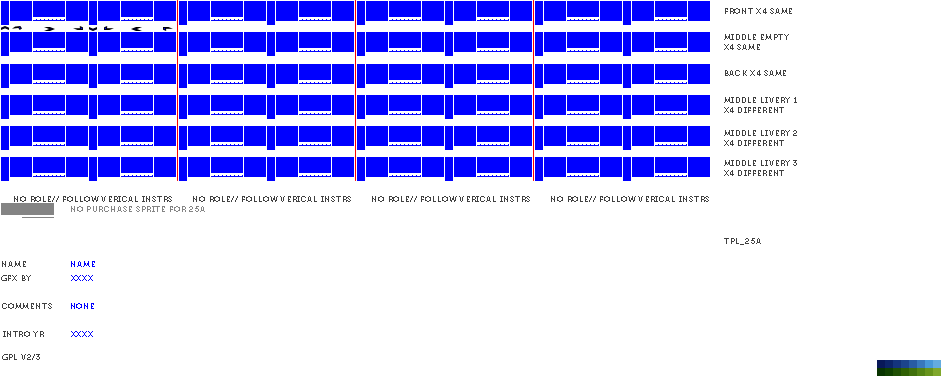
<style>
.page{position:relative;width:950px;height:380px;background:#ffffff}
.page>*{position:absolute;margin:0}
.t1{font:8px "Museo700-Regular";letter-spacing:0.075em;color:#404040;text-transform:uppercase}
.t2{font:8px "Museo700-Regular";letter-spacing:0.075em;color:#848484;text-transform:uppercase}
.t3{font:8px "Museo700-Regular";letter-spacing:0.075em;color:#0000ff;text-transform:uppercase}
</style>
<div class="page">
<p class="t1" style="left:725px;top:8px;width:67px;height:6px">front x4 same</p>
<p class="t1" style="left:724px;top:34px;width:65px;height:16px">middle empty<br>x4 same</p>
<p class="t1" style="left:725px;top:70px;width:61px;height:6px">back x4 same</p>
<p class="t1" style="left:724px;top:97px;width:73px;height:16px">middle livery 1<br>x4 different</p>
<p class="t1" style="left:724px;top:130px;width:73px;height:16px">middle livery 2<br>x4 different</p>
<p class="t1" style="left:724px;top:160px;width:73px;height:16px">middle livery 3<br>x4 different</p>
<p class="t1" style="left:14px;top:196px;width:158px;height:6px">no role// follow verical instrs</p>
<p class="t1" style="left:193px;top:196px;width:158px;height:6px">no role// follow verical instrs</p>
<p class="t1" style="left:372px;top:196px;width:158px;height:6px">no role// follow verical instrs</p>
<p class="t1" style="left:551px;top:196px;width:158px;height:6px">no role// follow verical instrs</p>
<p class="t2" style="left:71px;top:206px;width:134px;height:6px">no purchase sprite for 25A</p>
<p class="t1" style="left:724px;top:238px;width:37px;height:7px">tpl_25a</p>
<p class="t1" style="left:2px;top:261px;width:24px;height:6px">name</p>
<p class="t3" style="left:71px;top:261px;width:24px;height:6px">name</p>
<p class="t1" style="left:1px;top:275px;width:30px;height:6px">gfx by</p>
<p class="t3" style="left:71px;top:275px;width:22px;height:6px">xxxx</p>
<p class="t1" style="left:2px;top:303px;width:50px;height:6px">comments</p>
<p class="t3" style="left:71px;top:303px;width:23px;height:6px">none</p>
<p class="t1" style="left:3px;top:331px;width:41px;height:6px">intro yr</p>
<p class="t3" style="left:71px;top:331px;width:22px;height:6px">xxxx</p>
<p class="t1" style="left:2px;top:354px;width:38px;height:6px">gpl v2/3</p>
</div>
